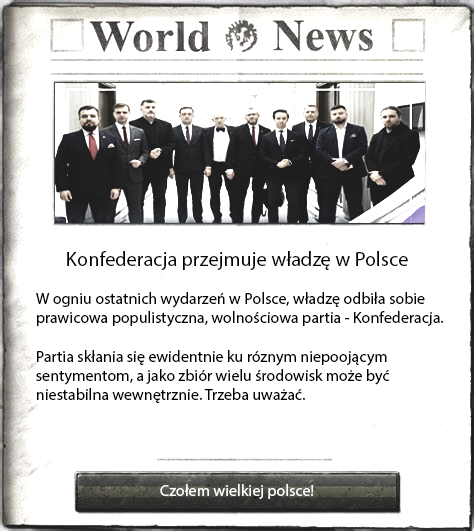
<style>
.page{position:relative;width:474px;height:531px;background:#ffffff}
.page>*{position:absolute;margin:0}
.t1{font:20.3px "MyriadPro-Regular";color:#010100}
.t2{font:16px "MyriadPro-Regular";color:#010100}
.t3{font:16px "MyriadPro-Regular";color:#ffffff}
</style>
<div class="page">
<p class="t1" style="left:67px;top:251px;width:341px;height:19px">Konfederacja przejmuje władzę w Polsce</p>
<p class="t2" style="left:36px;top:292px;width:408px;height:111px">W ogniu ostatnich wydarzeń w Polsce, władzę odbiła sobie prawicowa populistyczna, wolnościowa partia - Konfederacja.<br><br>Partia skłania się ewidentnie ku róznym niepoojącym sentymentom, a jako zbiór wielu środowisk może być niestabilna wewnętrznie. Trzeba uważać.</p>
<p class="t3" style="left:160px;top:484px;width:154px;height:15px">Czołem wielkiej polsce!</p>
</div>
